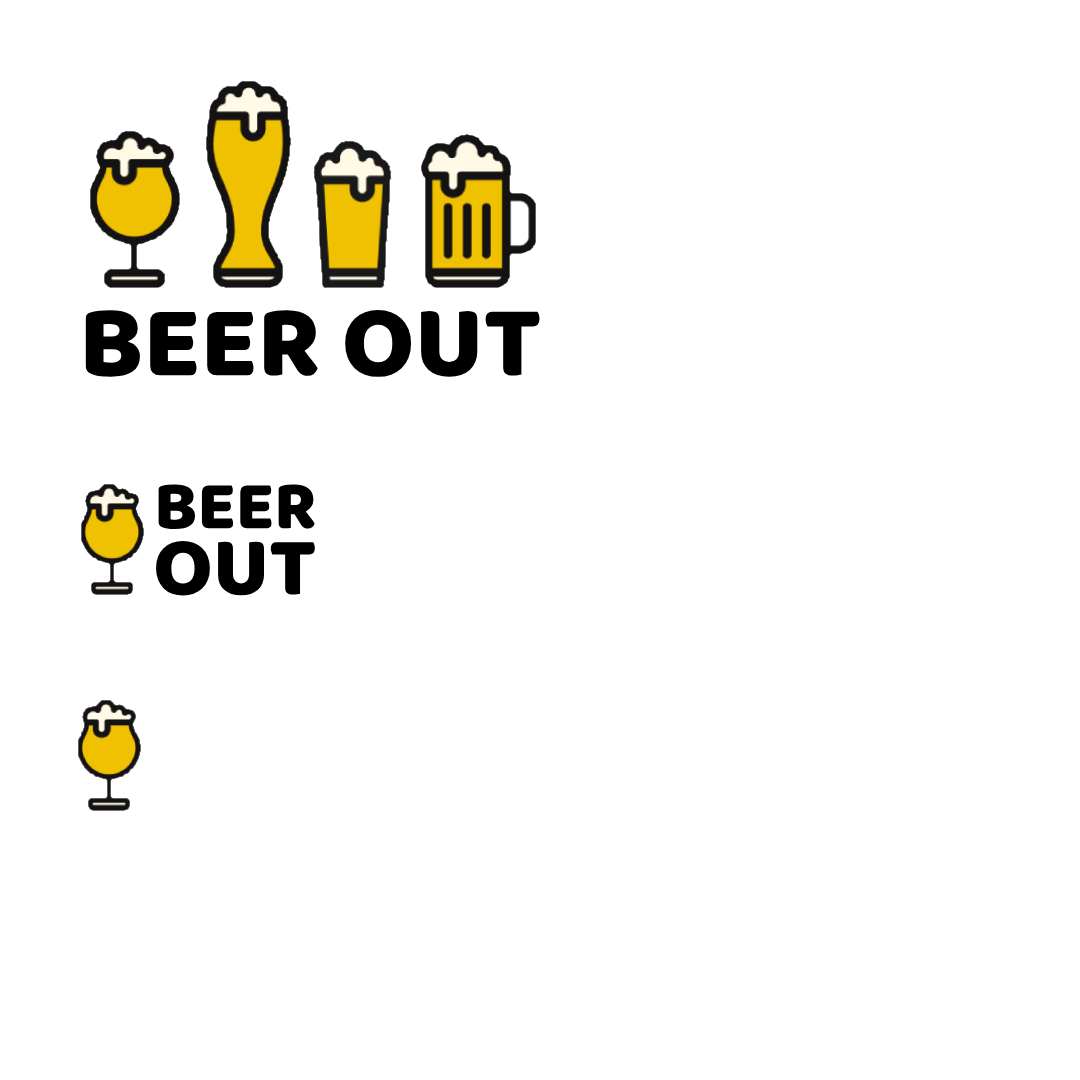
<style>
.page{position:relative;width:1080px;height:1080px;background:#ffffff}
.page>*{position:absolute;margin:0}
.t1{font:104px "Baloo";color:#000000}
.t2{font:70px "Baloo";color:#000000}
.t3{font:85px "Baloo";color:#000000}
</style>
<div class="page">
<p class="t1" style="left:85px;top:310px;width:455px;height:67px">BEER OUT</p>
<p class="t2" style="left:158px;top:484px;width:157px;height:46px">BEER</p>
<p class="t3" style="left:156px;top:540px;width:159px;height:56px">OUT</p>
</div>
